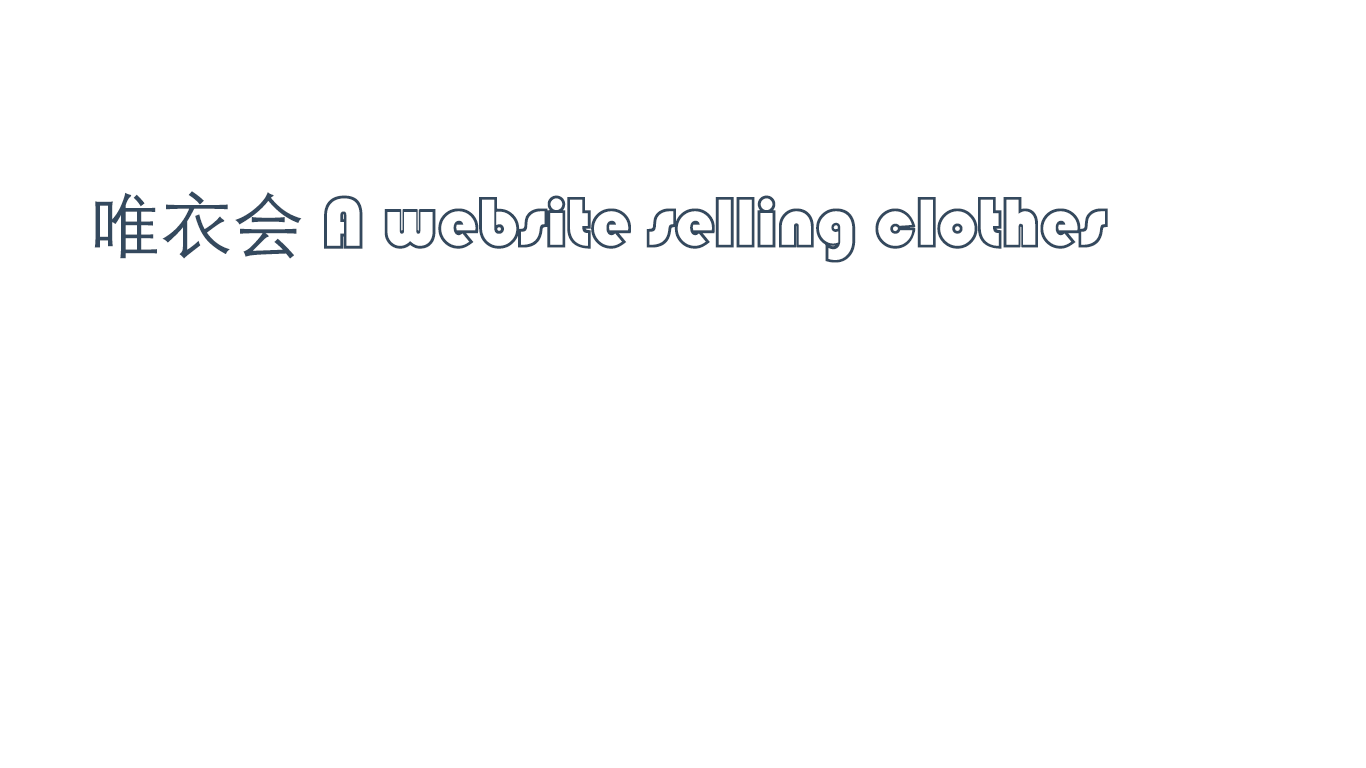
<style>
.page{position:relative;width:1366px;height:768px;background:#ffffff}
.page>*{position:absolute;margin:0}
.t1{font:72px "STCaiyun";color:#34495e}
.t2{font:72px "STXihei";color:#34495e}
</style>
<div class="page">
<p class="t1" style="left:94px;top:191px;width:1014px;height:72px"><span class="t2">唯衣会</span> A website selling clothes</p>
</div>
